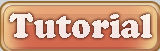
<style>
.page{position:relative;width:160px;height:51px}
.page>*{position:absolute;margin:0}
.t1{font:32.3px "CooperBlackStd";color:#f7e8e4}
</style>
<div class="page">
<p class="t1" style="left:9px;top:13px;width:143px;height:25px">Tutorial</p>
</div>
